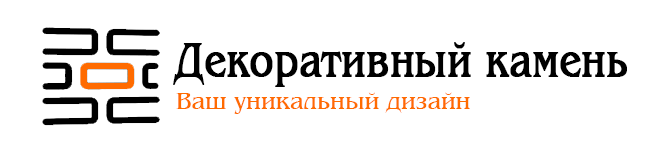
<style>
.page{position:relative;width:666px;height:142px;background:#ffffff}
.page>*{position:absolute;margin:0}
.t1{font:49.5px "Benguiat";color:#000000;font-weight:bold;scale:0.78 1}
.t2{font:24px "Benguiat";color:#ff6b00}
</style>
<div class="page">
<p class="t1" style="left:173px;top:42px;width:454px;height:45px">Декоративный камень</p>
<p class="t2" style="left:176px;top:92px;width:294px;height:22px">Ваш уникальный дизайн</p>
</div>
